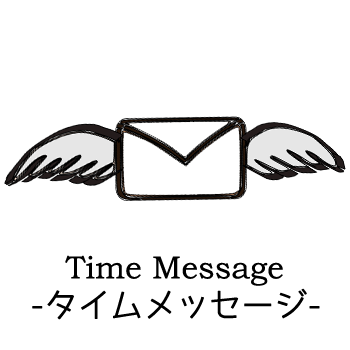
<style>
.page{position:relative;width:350px;height:350px;background:#ffffff}
.page>*{position:absolute;margin:0}
.t1{font:32px "BookmanOldStyle";color:#000000}
.t2{font:40px "BookmanOldStyle";color:#000000}
.t3{font:32px "07YasashisaGothic";color:#000000}
</style>
<div class="page">
<p class="t1" style="left:32px;top:255px;width:288px;height:65px"><span class="t2">  </span> Time Message<br><span class="t3">-タイムメッセージ-</span></p>
</div>
